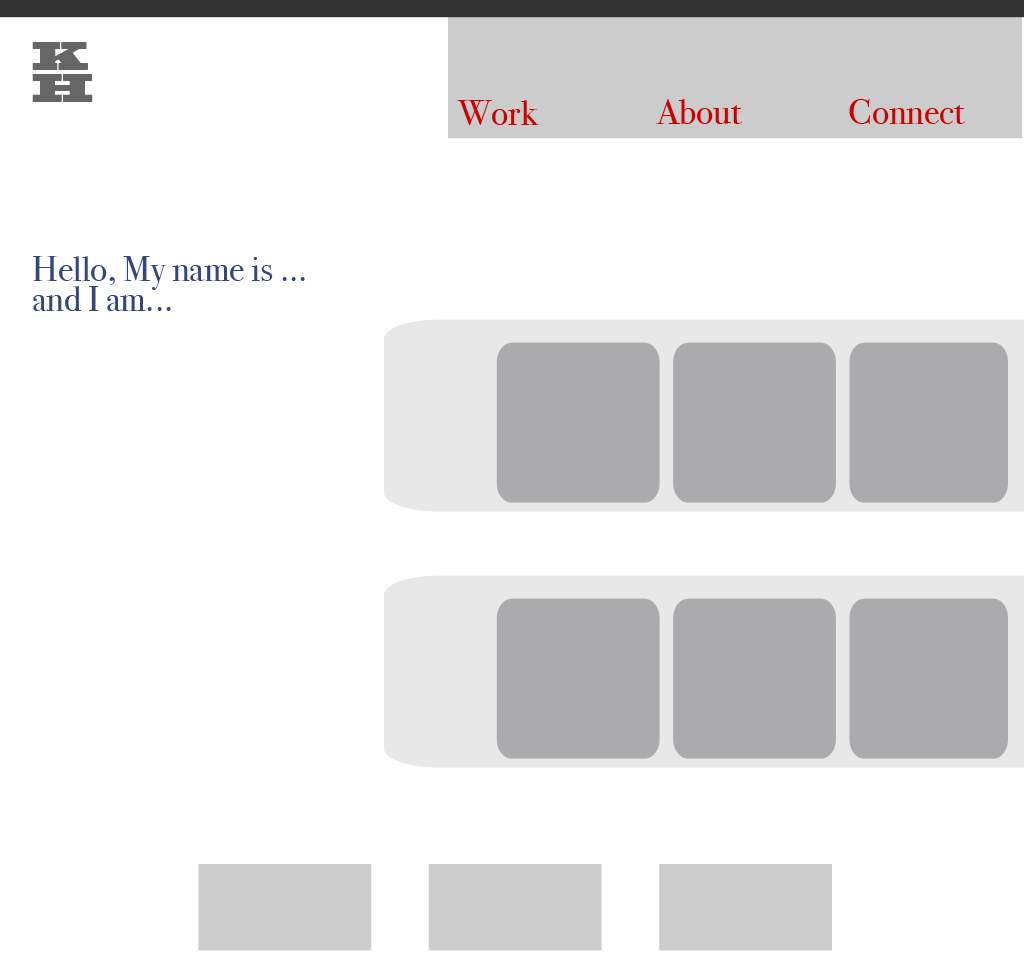
<style>
.page{position:relative;width:1024px;height:960px;background:#ffffff}
.page>*{position:absolute;margin:0}
.t1{font:37.5px "BlackoakStd";color:#666666;scale:0.79 1}
.t2{font:36px "BodoniSvtyTwoITCTTBook";color:#cc0000}
.t3{font:36px "BodoniSvtyTwoITCTTBook";color:#34467e}
</style>
<div class="page">
<p class="t1" style="left:32px;top:42px;width:61px;height:60px">KH</p>
<p class="t2" style="left:457px;top:100px;width:83px;height:25px">Work</p>
<p class="t2" style="left:656px;top:99px;width:86px;height:25px">About</p>
<p class="t2" style="left:849px;top:99px;width:116px;height:25px">Connect</p>
<p class="t3" style="left:33px;top:256px;width:272px;height:55px">Hello, My name is ... and I am...</p>
</div>
